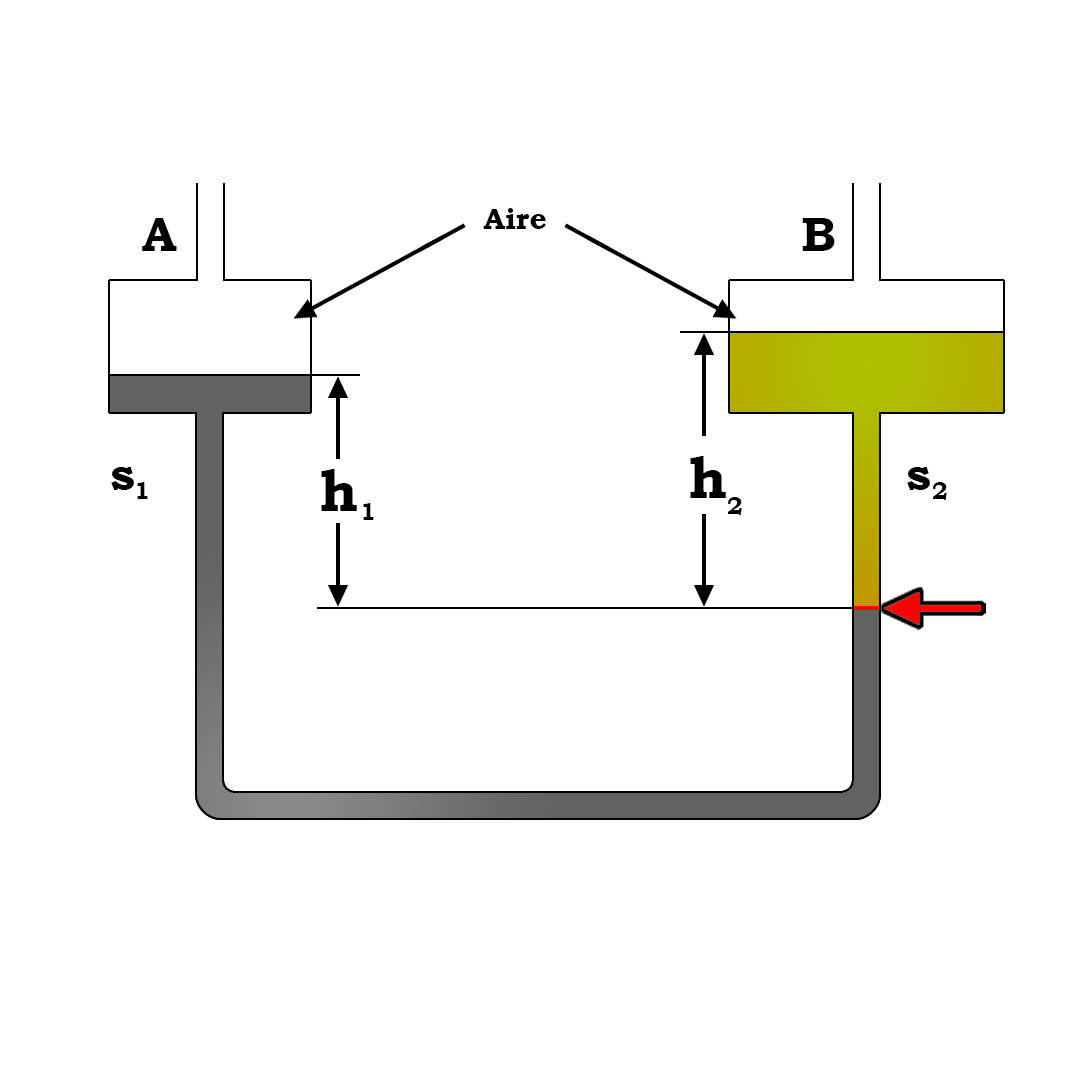
<style>
.page{position:relative;width:1080px;height:1080px;background:#ffffff}
.page>*{position:absolute;margin:0}
.t1{font:30px "BookmanOldStyle-Bold";color:#000000}
.t2{font:48px "BookmanOldStyle-Bold";color:#000000}
.t3{font:58.3px "BookmanOldStyle-Bold";color:#000000}
.t4{font:24px "BookmanOldStyle-Bold";color:#000000}
</style>
<div class="page">
<p class="t1" style="left:483px;top:208px;width:63px;height:21px">Aire</p>
<p class="t2" style="left:142px;top:218px;width:35px;height:33px">A</p>
<p class="t2" style="left:802px;top:218px;width:33px;height:33px">B</p>
<p class="t3" style="left:690px;top:456px;width:36px;height:42px">h</p>
<p class="t2" style="left:111px;top:467px;width:23px;height:23px">s</p>
<p class="t3" style="left:321px;top:469px;width:36px;height:42px">h</p>
<p class="t2" style="left:907px;top:467px;width:23px;height:23px">s</p>
<p class="t4" style="left:137px;top:482px;width:11px;height:17px">1</p>
<p class="t4" style="left:933px;top:482px;width:14px;height:18px">2</p>
<p class="t4" style="left:728px;top:497px;width:14px;height:18px">2</p>
<p class="t4" style="left:363px;top:503px;width:11px;height:17px">1</p>
</div>
